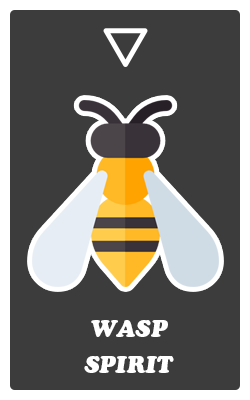
<style>
.page{position:relative;width:250px;height:400px;background:#3c3c3c}
.page>*{position:absolute;margin:0}
.t1{font:24px/36px "CooperBlackStd-Italic";color:#ffffff}
</style>
<div class="page">
<p class="t1" style="left:84px;top:320px;width:90px;height:53px;text-align:center">WASP<br>SPIRIT</p>
</div>
